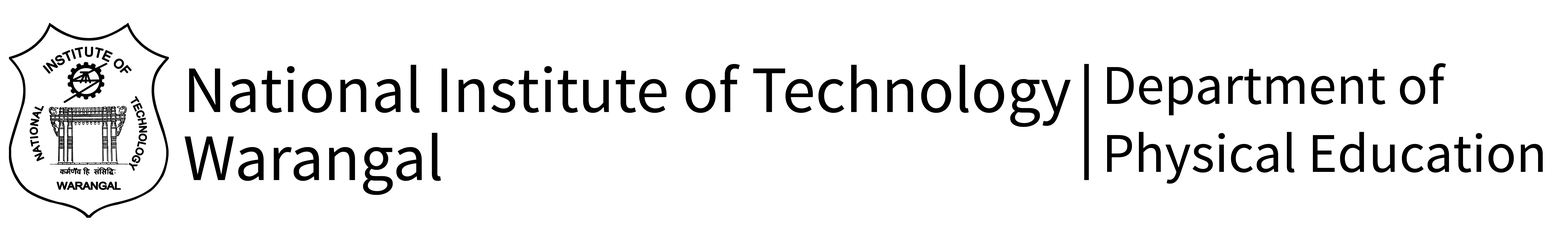
<style>
.page{position:relative;width:1568px;height:238px;background:#ffffff}
.page>*{position:absolute;margin:0}
.t1{font:66.4px/34.1px "SourceSansPro-Regular";color:#000000}
.t2{font:56.2px/34.1px "SourceSansPro-Regular";color:#000000}
</style>
<div class="page">
<p class="t1" style="left:185px;top:64px;width:886px;height:131px">National Institute of Technology <br><br>Warangal</p>
<p class="t2" style="left:1107px;top:63px;width:436px;height:121px">Department of <br><br>Physical Education</p>
</div>
